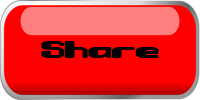
<style>
.page{position:relative;width:200px;height:100px;background:#ff0000}
.page>*{position:absolute;margin:0}
.t1{font:25px "MacropsiaBRK";color:#000000}
</style>
<div class="page">
<p class="t1" style="left:41px;top:41px;width:118px;height:17px">Share</p>
</div>
